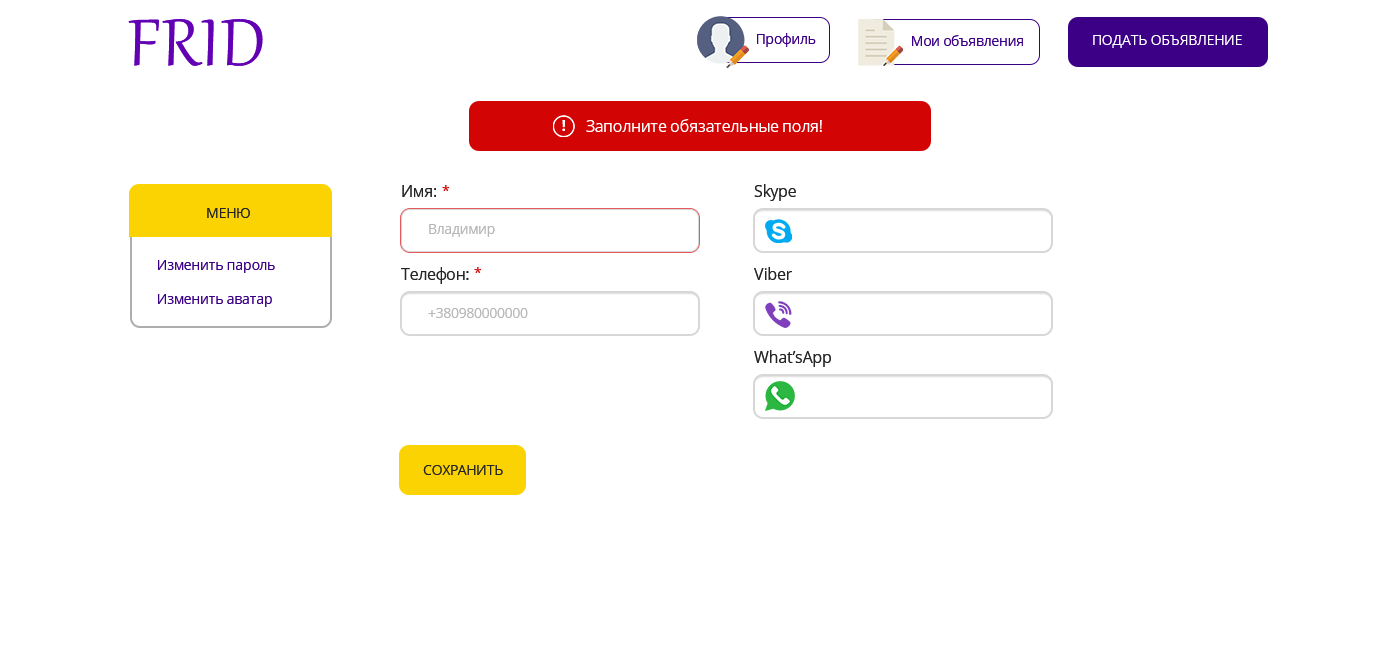
<style>
.page{position:relative;width:1400px;height:650px;background:#ffffff}
.page>*{position:absolute;margin:0}
.t1{font:81.3px "Gabriola";letter-spacing:0.025em;color:#6200b3}
.t2{font:14px "OpenSans";letter-spacing:-0.024em;color:#3b0086}
.t3{font:14px "OpenSans";letter-spacing:-0.024em;color:#ffffff}
.t4{font:16px "OpenSans";letter-spacing:-0.024em;color:#ffffff}
.t5{font:16px "OpenSans";letter-spacing:-0.024em;color:#252525}
.t6{font:14px "OpenSans";letter-spacing:-0.024em;color:#d20404}
.t7{font:14px "OpenSans";letter-spacing:-0.024em;color:#252525}
.t8{font:14px "OpenSans";letter-spacing:-0.024em;color:#b7b7b7}
</style>
<div class="page">
<p class="t1" style="left:128px;top:19px;width:135px;height:47px">FRID</p>
<p class="t2" style="left:757px;top:33px;width:59px;height:14px">Профиль</p>
<p class="t2" style="left:912px;top:35px;width:111px;height:11px">Мои объявления</p>
<p class="t3" style="left:1093px;top:35px;width:149px;height:13px">ПОДАТЬ ОБЪЯВЛЕНИЕ</p>
<p class="t4" style="left:586px;top:119px;width:236px;height:13px">Заполните обязательные поля!</p>
<p class="t5" style="left:402px;top:185px;width:34px;height:12px">Имя:</p>
<p class="t6" style="left:442px;top:185px;width:8px;height:6px">*</p>
<p class="t5" style="left:754px;top:184px;width:42px;height:17px">Skype</p>
<p class="t7" style="left:207px;top:208px;width:43px;height:10px">МЕНЮ</p>
<p class="t8" style="left:429px;top:224px;width:66px;height:13px">Владимир</p>
<p class="t2" style="left:158px;top:260px;width:117px;height:13px">Изменить пароль</p>
<p class="t5" style="left:401px;top:267px;width:68px;height:17px">Телефон:</p>
<p class="t6" style="left:474px;top:267px;width:8px;height:6px">*</p>
<p class="t5" style="left:754px;top:267px;width:38px;height:13px">Viber</p>
<p class="t2" style="left:158px;top:294px;width:114px;height:13px">Изменить аватар</p>
<p class="t8" style="left:428px;top:308px;width:100px;height:10px">+380980000000</p>
<p class="t5" style="left:754px;top:350px;width:77px;height:17px">What’sApp</p>
<p class="t7" style="left:423px;top:465px;width:80px;height:10px">СОХРАНИТЬ</p>
</div>
